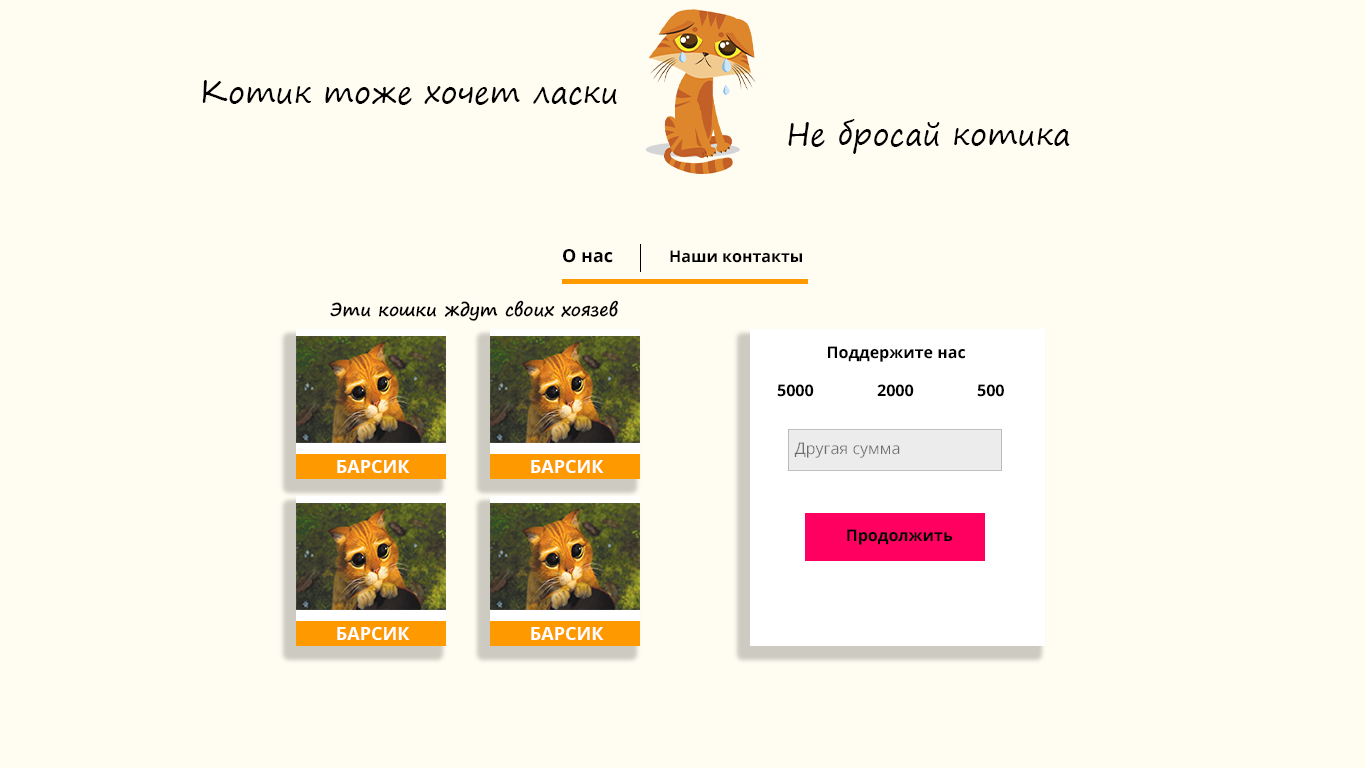
<style>
.page{position:relative;width:1366px;height:768px;background:#fffcf1}
.page>*{position:absolute;margin:0}
.t1{font:30px "SegoePrint";color:#000000}
.t2{font:18px "OpenSans-Bold";color:#000000}
.t3{font:16px "OpenSans-Bold";color:#000000}
.t4{font:18px "SegoePrint-Bold";color:#000000}
.t5{font:16px "OpenSans-Regular";color:#6d6d6d}
.t6{font:18px "OpenSans-Bold";color:#ffffff}
</style>
<div class="page">
<p class="t1" style="left:202px;top:80px;width:415px;height:25px">Котик тоже хочет ласки</p>
<p class="t1" style="left:788px;top:119px;width:282px;height:35px">Не бросай котика</p>
<p class="t2" style="left:563px;top:249px;width:50px;height:14px">О нас</p>
<p class="t3" style="left:670px;top:250px;width:132px;height:13px">Наши контакты</p>
<p class="t4" style="left:330px;top:300px;width:288px;height:21px">Эти кошки ждут своих хоязев</p>
<p class="t3" style="left:828px;top:346px;width:138px;height:16px">Поддержите нас</p>
<p class="t3" style="left:777px;top:384px;width:37px;height:13px">5000</p>
<p class="t3" style="left:877px;top:384px;width:37px;height:13px">2000</p>
<p class="t3" style="left:977px;top:384px;width:27px;height:13px">500</p>
<p class="t5" style="left:794px;top:442px;width:106px;height:16px">Другая сумма</p>
<p class="t6" style="left:337px;top:460px;width:73px;height:13px">БАРСИК</p>
<p class="t6" style="left:531px;top:460px;width:73px;height:13px">БАРСИК</p>
<p class="t3" style="left:847px;top:529px;width:106px;height:16px">Продолжить</p>
<p class="t6" style="left:337px;top:627px;width:73px;height:13px">БАРСИК</p>
<p class="t6" style="left:531px;top:627px;width:73px;height:13px">БАРСИК</p>
</div>
